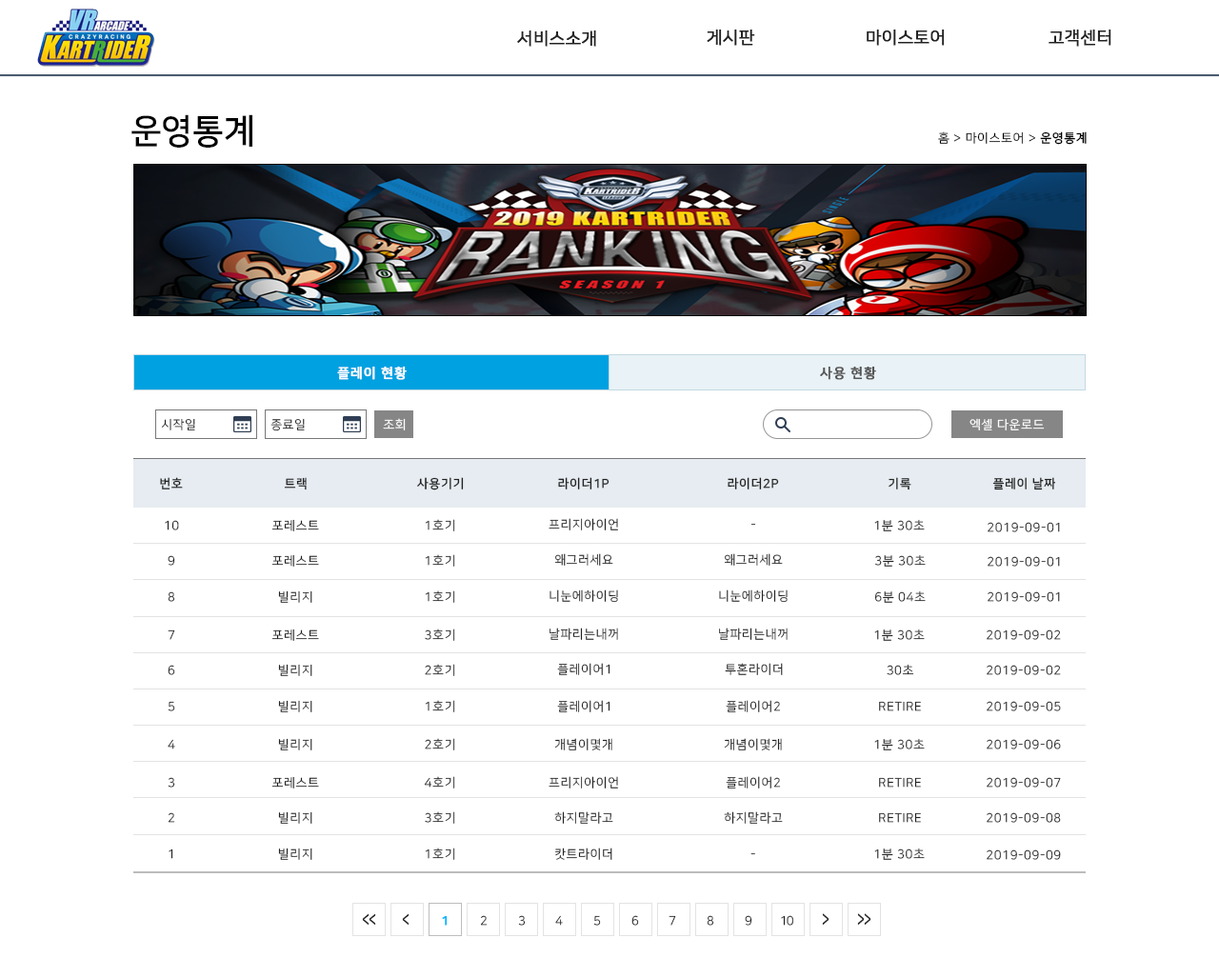
<style>
.page{position:relative;width:1219px;height:978px;background:#ffffff}
.page>*{position:absolute;margin:0}
.t1{font:17.1px "NanumSquareR";color:#222222;font-weight:bold}
.t2{font:34.3px "NanumSquareB";color:#000000}
.t3{font:12.4px "NanumSquareR";letter-spacing:0.05em;color:#000000}
.t4{font:12.4px "NanumSquareB";letter-spacing:0.05em;color:#000000}
.t5{font:13.3px "NanumSquareB";letter-spacing:0.05em;color:#fffefe;font-weight:bold}
.t6{font:13.3px "NanumSquareB";letter-spacing:0.05em;color:#555555;font-weight:bold}
.t7{font:12.4px "NanumSquareR";letter-spacing:0.05em;color:#222222}
.t8{font:12.4px "NanumSquareR";letter-spacing:0.05em;color:#ffffff}
.t9{font:12.4px "NanumSquareB";letter-spacing:0.05em;color:#222222}
.t10{font:12.4px "NanumSquareR";letter-spacing:0.05em}
.t11{font:19.5px "NanumSquareB";letter-spacing:-0.075em;color:#222222;scale:0.63 1}
.t12{font:12.4px "NanumSquareB";letter-spacing:-0.075em;color:#00b6ff;font-weight:bold}
.t13{font:12.4px "NanumSquareR";letter-spacing:-0.075em}
.t14{font:12.4px "NanumSquareR";letter-spacing:-0.075em;color:#222222}
.t15{font:20.1px "NanumSquareB";letter-spacing:-0.075em;color:#222222;scale:0.61 1}
</style>
<div class="page">
<p class="t1" style="left:517px;top:30px;width:79px;height:17px">서비스소개</p>
<p class="t1" style="left:707px;top:29px;width:48px;height:17px">게시판</p>
<p class="t1" style="left:867px;top:29px;width:78px;height:17px">마이스토어</p>
<p class="t1" style="left:1049px;top:29px;width:62px;height:17px">고객센터</p>
<p class="t2" style="left:131px;top:114px;width:121px;height:34px">운영통계</p>
<p class="t3" style="left:938px;top:131px;width:149px;height:14px">홈 &gt; 마이스토어 &gt; <span class="t4">운영통계</span></p>
<p class="t5" style="left:337px;top:366px;width:70px;height:14px">플레이 현황</p>
<p class="t6" style="left:820px;top:366px;width:56px;height:14px">사용 현황</p>
<p class="t7" style="left:161px;top:418px;width:34px;height:12px">시작일</p>
<p class="t7" style="left:270px;top:418px;width:35px;height:13px">종료일</p>
<p class="t8" style="left:383px;top:418px;width:23px;height:12px">조회</p>
<p class="t8" style="left:970px;top:418px;width:75px;height:12px">엑셀 다운로드</p>
<p class="t9" style="left:160px;top:477px;width:23px;height:13px">번호</p>
<p class="t9" style="left:284px;top:477px;width:23px;height:13px">트랙</p>
<p class="t9" style="left:417px;top:477px;width:47px;height:13px">사용기기</p>
<p class="t9" style="left:558px;top:477px;width:52px;height:13px">라이더1P</p>
<p class="t9" style="left:728px;top:477px;width:51px;height:13px">라이더2P</p>
<p class="t9" style="left:889px;top:477px;width:22px;height:13px">기록</p>
<p class="t9" style="left:992px;top:477px;width:64px;height:13px">플레이 날짜</p>
<p class="t7" style="left:165px;top:520px;width:14px;height:10px">10</p>
<p class="t7" style="left:271px;top:519px;width:48px;height:12px">포레스트</p>
<p class="t10" style="left:425px;top:519px;width:30px;height:12px">1호기</p>
<p class="t7" style="left:549px;top:518px;width:69px;height:12px">프리지아이언</p>
<p class="t7" style="left:874px;top:519px;width:51px;height:12px">1분 30초</p>
<p class="t7" style="left:988px;top:522px;width:72px;height:10px">2019-09-01</p>
<p class="t10" style="left:751px;top:524px;width:5px;height:2px">-</p>
<p class="t7" style="left:168px;top:555px;width:7px;height:11px">9</p>
<p class="t7" style="left:271px;top:554px;width:48px;height:13px">포레스트</p>
<p class="t10" style="left:425px;top:554px;width:30px;height:13px">1호기</p>
<p class="t7" style="left:554px;top:553px;width:59px;height:13px">왜그러세요</p>
<p class="t7" style="left:724px;top:553px;width:59px;height:13px">왜그러세요</p>
<p class="t7" style="left:875px;top:554px;width:51px;height:13px">3분 30초</p>
<p class="t7" style="left:988px;top:556px;width:72px;height:11px">2019-09-01</p>
<p class="t10" style="left:168px;top:591px;width:7px;height:11px">8</p>
<p class="t7" style="left:278px;top:590px;width:34px;height:13px">빌리지</p>
<p class="t10" style="left:425px;top:590px;width:30px;height:13px">1호기</p>
<p class="t7" style="left:550px;top:590px;width:68px;height:13px">니눈에하이딩</p>
<p class="t7" style="left:719px;top:590px;width:69px;height:13px">니눈에하이딩</p>
<p class="t7" style="left:874px;top:590px;width:52px;height:13px">6분 04초</p>
<p class="t7" style="left:988px;top:591px;width:72px;height:11px">2019-09-01</p>
<p class="t7" style="left:168px;top:630px;width:7px;height:10px">7</p>
<p class="t7" style="left:271px;top:629px;width:48px;height:12px">포레스트</p>
<p class="t10" style="left:425px;top:629px;width:30px;height:12px">3호기</p>
<p class="t7" style="left:550px;top:628px;width:68px;height:12px">날파리는내꺼</p>
<p class="t7" style="left:719px;top:628px;width:69px;height:12px">날파리는내꺼</p>
<p class="t7" style="left:874px;top:629px;width:51px;height:12px">1분 30초</p>
<p class="t7" style="left:987px;top:630px;width:74px;height:10px">2019-09-02</p>
<p class="t10" style="left:168px;top:665px;width:7px;height:10px">6</p>
<p class="t7" style="left:278px;top:664px;width:34px;height:12px">빌리지</p>
<p class="t10" style="left:425px;top:664px;width:30px;height:12px">2호기</p>
<p class="t7" style="left:557px;top:663px;width:53px;height:12px">플레이어1</p>
<p class="t7" style="left:725px;top:663px;width:58px;height:12px">투혼라이더</p>
<p class="t7" style="left:887px;top:664px;width:27px;height:11px">30초</p>
<p class="t7" style="left:987px;top:665px;width:74px;height:10px">2019-09-02</p>
<p class="t10" style="left:168px;top:701px;width:7px;height:10px">5</p>
<p class="t7" style="left:278px;top:700px;width:34px;height:12px">빌리지</p>
<p class="t10" style="left:425px;top:700px;width:30px;height:12px">1호기</p>
<p class="t7" style="left:557px;top:700px;width:53px;height:12px">플레이어1</p>
<p class="t7" style="left:726px;top:700px;width:55px;height:12px">플레이어2</p>
<p class="t7" style="left:879px;top:701px;width:42px;height:10px">RETIRE</p>
<p class="t7" style="left:987px;top:701px;width:74px;height:10px">2019-09-05</p>
<p class="t10" style="left:168px;top:739px;width:7px;height:11px">4</p>
<p class="t7" style="left:278px;top:738px;width:34px;height:13px">빌리지</p>
<p class="t10" style="left:425px;top:738px;width:30px;height:13px">2호기</p>
<p class="t7" style="left:554px;top:738px;width:58px;height:13px">개념이몇개</p>
<p class="t7" style="left:724px;top:738px;width:58px;height:13px">개념이몇개</p>
<p class="t7" style="left:874px;top:738px;width:51px;height:13px">1분 30초</p>
<p class="t7" style="left:987px;top:739px;width:74px;height:11px">2019-09-06</p>
<p class="t7" style="left:168px;top:777px;width:7px;height:11px">3</p>
<p class="t7" style="left:271px;top:776px;width:48px;height:13px">포레스트</p>
<p class="t10" style="left:424px;top:776px;width:31px;height:13px">4호기</p>
<p class="t7" style="left:549px;top:776px;width:69px;height:13px">프리지아이언</p>
<p class="t7" style="left:726px;top:776px;width:55px;height:13px">플레이어2</p>
<p class="t7" style="left:879px;top:777px;width:42px;height:11px">RETIRE</p>
<p class="t7" style="left:987px;top:777px;width:74px;height:11px">2019-09-07</p>
<p class="t10" style="left:168px;top:812px;width:7px;height:11px">2</p>
<p class="t7" style="left:278px;top:811px;width:34px;height:13px">빌리지</p>
<p class="t10" style="left:425px;top:811px;width:30px;height:13px">3호기</p>
<p class="t7" style="left:554px;top:811px;width:59px;height:13px">하지말라고</p>
<p class="t7" style="left:724px;top:811px;width:59px;height:13px">하지말라고</p>
<p class="t7" style="left:879px;top:812px;width:42px;height:11px">RETIRE</p>
<p class="t7" style="left:987px;top:812px;width:74px;height:11px">2019-09-08</p>
<p class="t7" style="left:169px;top:849px;width:4px;height:10px">1</p>
<p class="t7" style="left:278px;top:848px;width:34px;height:12px">빌리지</p>
<p class="t10" style="left:425px;top:848px;width:30px;height:12px">1호기</p>
<p class="t7" style="left:555px;top:848px;width:57px;height:12px">캇트라이더</p>
<p class="t10" style="left:751px;top:853px;width:4px;height:2px">-</p>
<p class="t7" style="left:874px;top:848px;width:51px;height:12px">1분 30초</p>
<p class="t7" style="left:987px;top:850px;width:74px;height:10px">2019-09-09</p>
<p class="t11" style="left:362px;top:913px;width:14px;height:13px">&lt;&lt;</p>
<p class="t11" style="left:402px;top:913px;width:8px;height:13px">&lt;</p>
<p class="t12" style="left:442px;top:915px;width:6px;height:11px">1</p>
<p class="t13" style="left:480px;top:915px;width:8px;height:11px">2</p>
<p class="t14" style="left:518px;top:915px;width:8px;height:11px">3</p>
<p class="t13" style="left:555px;top:915px;width:8px;height:11px">4</p>
<p class="t13" style="left:593px;top:915px;width:8px;height:11px">5</p>
<p class="t13" style="left:631px;top:915px;width:8px;height:11px">6</p>
<p class="t14" style="left:669px;top:915px;width:7px;height:11px">7</p>
<p class="t13" style="left:707px;top:915px;width:7px;height:11px">8</p>
<p class="t14" style="left:745px;top:915px;width:7px;height:11px">9</p>
<p class="t14" style="left:781px;top:915px;width:12px;height:11px">10</p>
<p class="t15" style="left:822px;top:913px;width:8px;height:13px;rotate:180deg">&lt;</p>
<p class="t15" style="left:857px;top:913px;width:14px;height:13px;rotate:180deg">&lt;&lt;</p>
</div>
